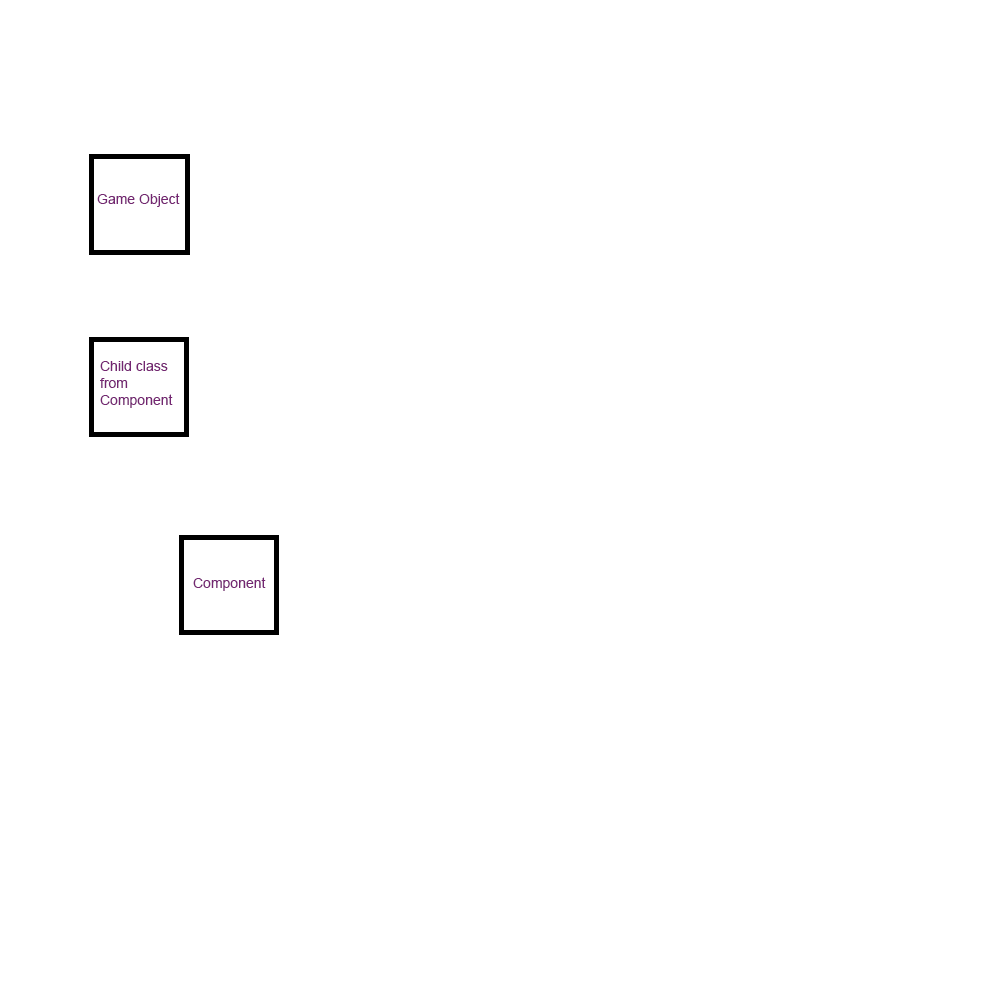
<style>
.page{position:relative;width:1000px;height:1000px;background:#ffffff}
.page>*{position:absolute;margin:0}
.t1{font:14px "ArialMT";color:#742672}
</style>
<div class="page">
<p class="t1" style="left:97px;top:193px;width:83px;height:14px">Game Object</p>
<p class="t1" style="left:100px;top:361px;width:73px;height:47px;text-align:right">Child class <br>from <br>Component</p>
<p class="t1" style="left:193px;top:577px;width:73px;height:14px">Component</p>
</div>
